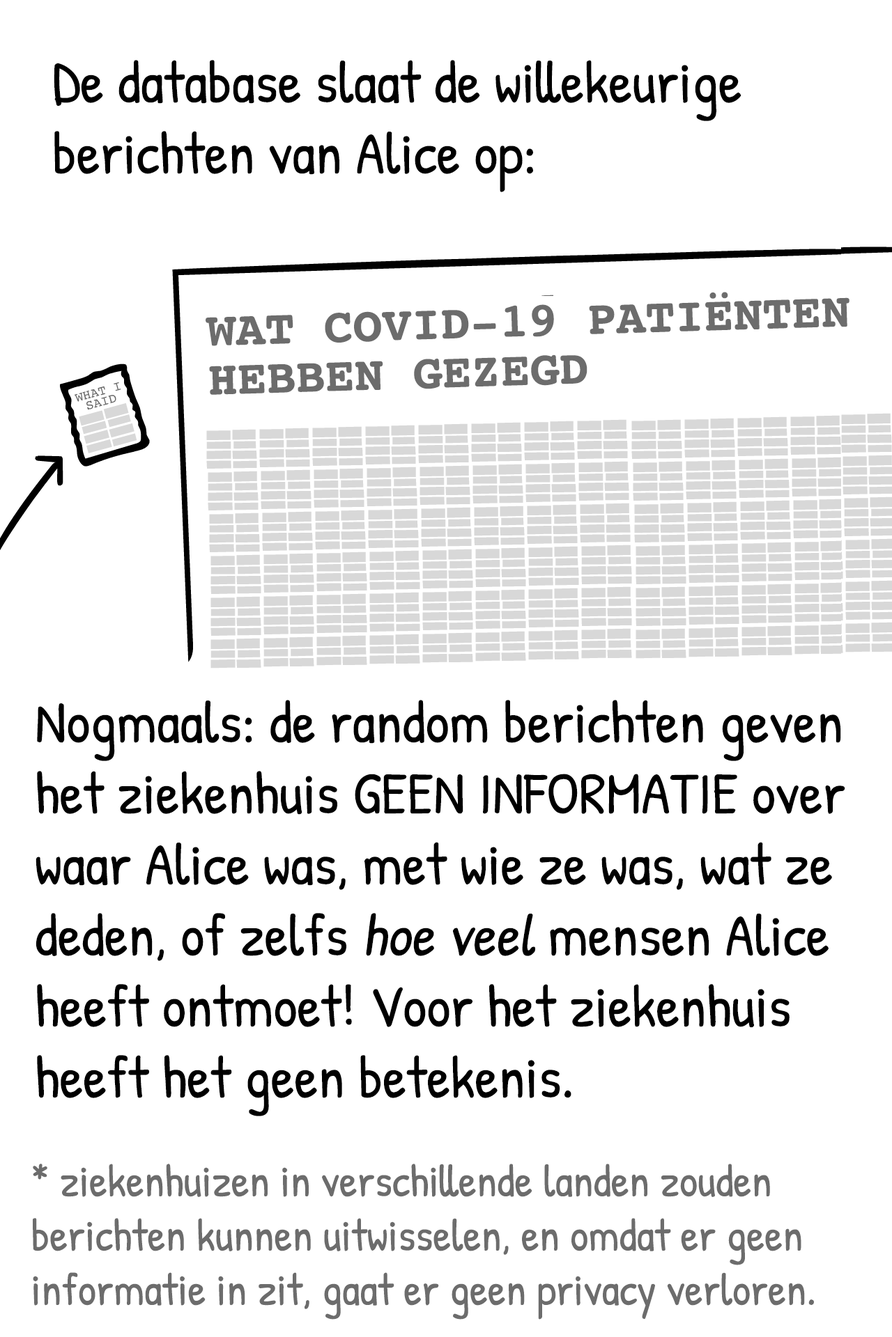
<style>
.page{position:relative;width:892px;height:1337px;background:#ffffff}
.page>*{position:absolute;margin:0}
.t1{font:59.2px "PatrickHand-Regular";color:#000000}
.t2{font:48.8px/48.9px "Courier-Bold";color:#6c6c6c}
.t3{font:59.2px "PatrickHand-Regular";color:#000000;font-style:italic}
.t4{font:45.3px "PatrickHand-Regular";color:#6c6c6c}
</style>
<div class="page">
<p class="t1" style="left:54px;top:60px;width:687px;height:132px">De database slaat de willekeurige<br>berichten van Alice op:</p>
<p class="t2" style="left:205px;top:292px;width:644px;height:103px;rotate:-2deg">WAT COVID-19 PATIËNTEN<br>HEBBEN GEZEGD</p>
<p class="t1" style="left:36px;top:700px;width:809px;height:417px">Nogmaals: de random berichten geven<br>het ziekenhuis GEEN INFORMATIE over<br>waar Alice was, met wie ze was, wat ze<br>deden, of zelfs <span class="t3">hoe veel</span> mensen Alice<br>heeft ontmoet! Voor het ziekenhuis<br>heeft het geen betekenis.</p>
<p class="t4" style="left:33px;top:1164px;width:781px;height:156px">* ziekenhuizen in verschillende landen zouden<br>berichten kunnen uitwisselen, en omdat er geen<br>informatie in zit, gaat er geen privacy verloren.</p>
</div>
